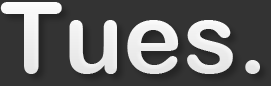
<style>
.page{position:relative;width:271px;height:86px;background:#333333}
.page>*{position:absolute;margin:0}
.t1{font:100px "ArialRoundedMTBold";color:#ffffff}
</style>
<div class="page">
<p class="t1" style="left:0px;top:2px;width:260px;height:72px">Tues.</p>
</div>
